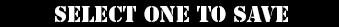
<style>
.page{position:relative;width:339px;height:27px;background:#000000}
.page>*{position:absolute;margin:0}
.t1{font:21.3px "StencilStd";color:#ffffff}
</style>
<div class="page">
<p class="t1" style="left:55px;top:6px;width:233px;height:16px">SELECT one to SAVE</p>
</div>
